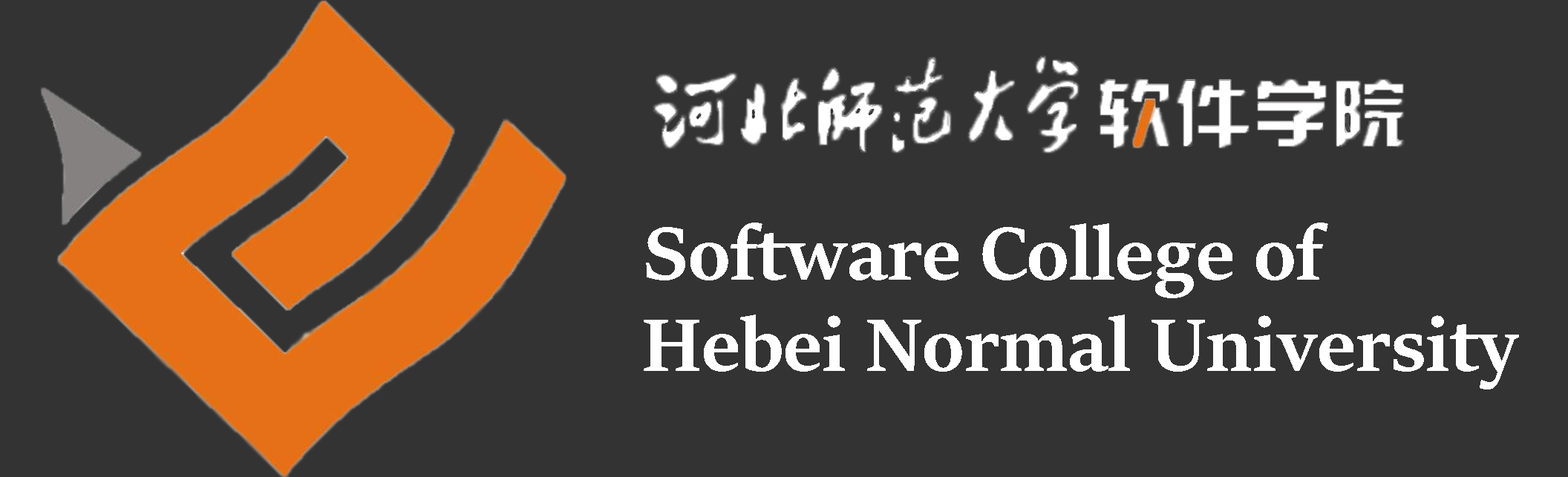
<style>
.page{position:relative;width:1568px;height:477px;background:#333333}
.page>*{position:absolute;margin:0}
.t1{font:83.2px "SitkaDisplay-Bold";color:#ffffff}
</style>
<div class="page">
<p class="t1" style="left:646px;top:223px;width:682px;height:75px">Software College of</p>
<p class="t1" style="left:644px;top:315px;width:875px;height:75px">Hebei Normal University</p>
</div>
